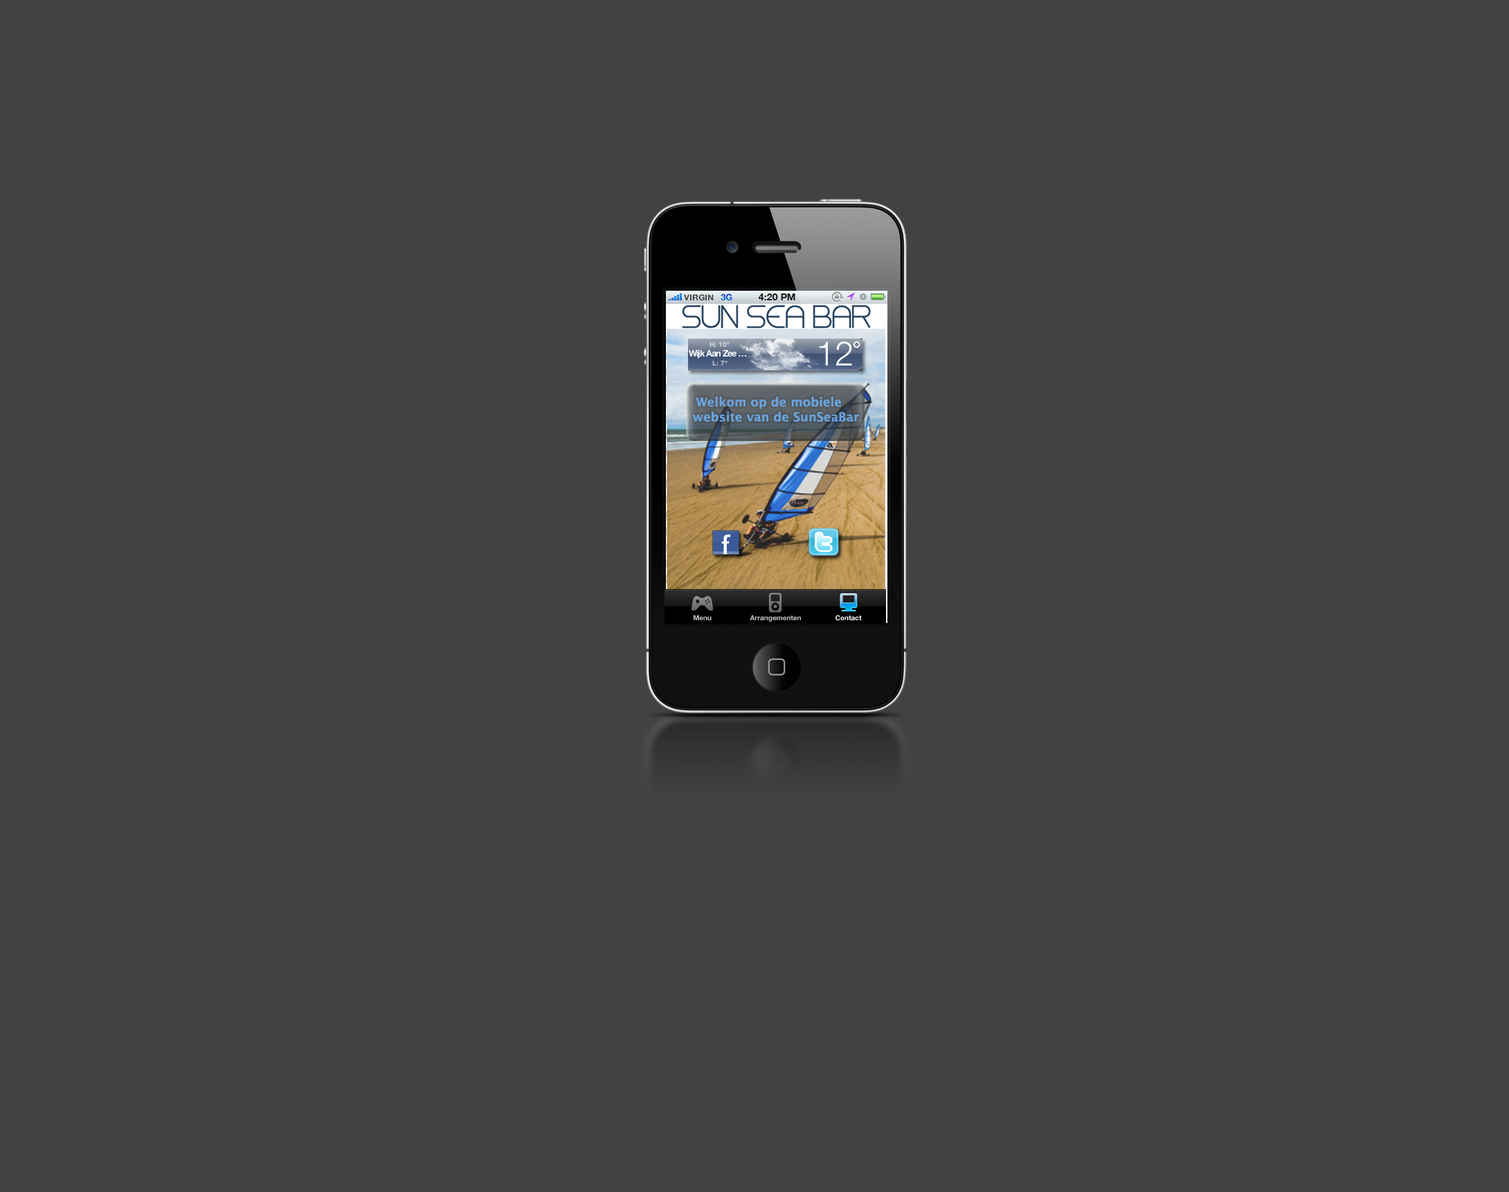
<style>
.page{position:relative;width:1509px;height:1192px;background:#424242}
.page>*{position:absolute;margin:0}
.t1{font:9px "HelveticaNeue-Bold";text-transform:uppercase}
.t2{font:9px "HelveticaNeue-Bold";color:#0c54c5;text-transform:uppercase}
.t3{font:9.7px "HelveticaNeue-Bold";color:#1a1b1b;text-transform:uppercase}
.t4{font:8.3px "HelveticaNeue-Bold";color:#404040;text-transform:uppercase}
.t5{font:12.5px "LucidaGrande-Bold";color:#6ba4df}
.t6{font:6.9px "HelveticaNeue-Bold";color:#c6c6c5}
.t7{font:6.9px "HelveticaNeue-Bold";color:#ffffff}
</style>
<div class="page">
<p class="t1" style="left:684px;top:294px;width:30px;height:7px">VIRGIN</p>
<p class="t2" style="left:721px;top:294px;width:11px;height:7px">3G</p>
<p class="t2" style="left:721px;top:294px;width:11px;height:7px">3G</p>
<p class="t3" style="left:758px;top:294px;width:37px;height:6px">4:20 PM</p>
<p class="t4" style="left:684px;top:294px;width:30px;height:7px">VIRGIN</p>
<p class="t5" style="left:693px;top:397px;width:166px;height:25px">Welkom op de mobiele website van de SunSeaBar</p>
<p class="t6" style="left:694px;top:615px;width:18px;height:5px">Menu</p>
<p class="t6" style="left:750px;top:615px;width:51px;height:7px">Arrangementen</p>
<p class="t7" style="left:836px;top:615px;width:26px;height:6px">Contact</p>
</div>
